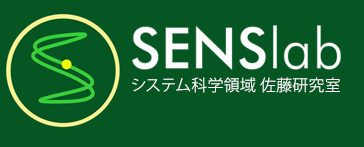
<style>
.page{position:relative;width:364px;height:147px;background:#055622}
.page>*{position:absolute;margin:0}
.t1{font:56.6px "FuturaBT-Medium";letter-spacing:0.01em;color:#ffffff}
.t2{font:56.6px "FuturaBT-Light";letter-spacing:0.01em;color:#ffffff}
.t3{font:16px "KozGoPr6N-Regular";letter-spacing:0.01em;color:#ffffff}
</style>
<div class="page">
<p class="t1" style="left:132px;top:25px;width:209px;height:45px">SENS<span class="t2">lab</span></p>
<p class="t3" style="left:132px;top:77px;width:208px;height:16px">システム科学領域 佐藤研究室</p>
</div>
